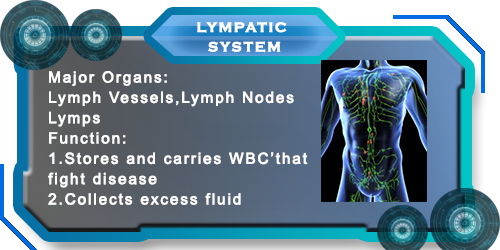
<style>
.page{position:relative;width:500px;height:250px}
.page>*{position:absolute;margin:0}
.t1{font:14px "CopperplateGothic-Bold";letter-spacing:0.1em;color:#ffffff;font-weight:bold}
.t2{font:15.2px/20.3px "ArialMT";letter-spacing:0.1em;color:#ffffff;font-weight:bold}
</style>
<div class="page">
<p class="t1" style="left:197px;top:21px;width:90px;height:12px">LYMPATIC</p>
<p class="t1" style="left:208px;top:41px;width:73px;height:12px">SYSTEM</p>
<p class="t2" style="left:48px;top:71px;width:260px;height:134px">Major Organs:<br>Lymph Vessels,Lymph Nodes<br>Lymps<br>Function:<br>1.Stores and carries WBC’that fight disease<br>2.Collects excess fluid</p>
</div>
